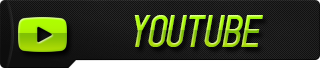
<style>
.page{position:relative;width:320px;height:68px}
.page>*{position:absolute;margin:0}
.t1{font:43px "71mksd2Am";font-style:italic}
</style>
<div class="page">
<p class="t1" style="left:134px;top:15px;width:129px;height:32px">YOUTUBE</p>
</div>
